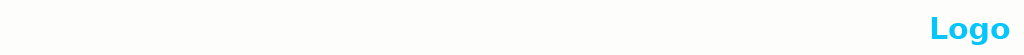
<style>
.page{position:relative;width:1024px;height:55px;background:#fdfdfc}
.page>*{position:absolute;margin:0}
.t1{font:30px "DejaVuSans-Bold";color:#04c6fd}
</style>
<div class="page">
<p class="t1" style="left:931px;top:17px;width:79px;height:28px">Logo</p>
</div>
